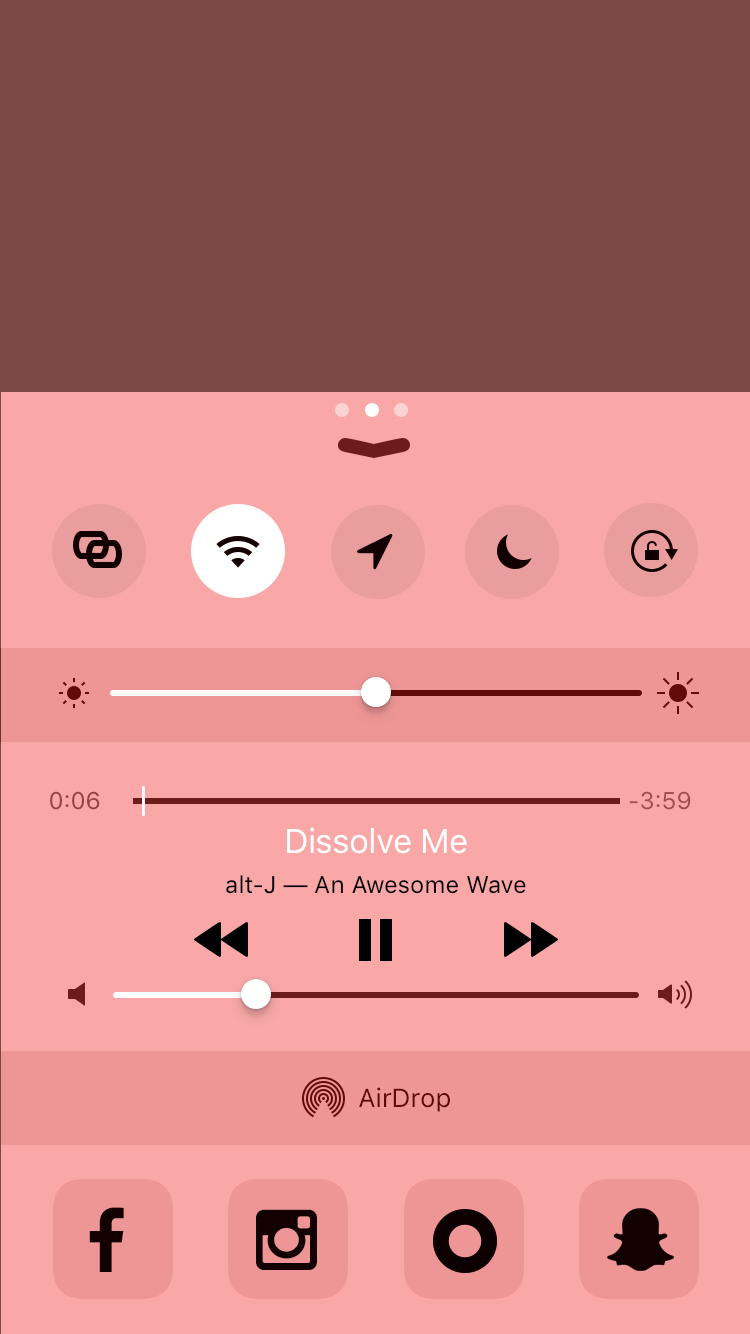
<style>
.page{position:relative;width:750px;height:1334px;background:#f9a7a7}
.page>*{position:absolute;margin:0}
.t1{font:24px "SFUIText-Regular";color:#934141}
.t2{font:24px "SFUIText-Regular";color:#9f4e4e}
.t3{font:34px "SFUIText-Regular";letter-spacing:-0.025em;color:#ffffff}
.t4{font:24px "SFUIText-Regular";color:#000000}
.t5{font:26px "SFUIText-Regular";color:#620a0a}
</style>
<div class="page">
<p class="t1" style="left:50px;top:791px;width:50px;height:19px">0:06</p>
<p class="t2" style="left:629px;top:791px;width:62px;height:19px">-3:59</p>
<p class="t3" style="left:287px;top:827px;width:180px;height:27px">Dissolve Me</p>
<p class="t4" style="left:226px;top:875px;width:300px;height:19px">alt-J ­— An Awesome Wave</p>
<p class="t5" style="left:359px;top:1087px;width:91px;height:25px">AirDrop</p>
</div>
